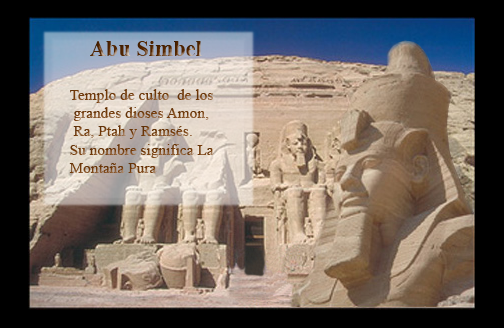
<style>
.page{position:relative;width:504px;height:328px;background:#000000}
.page>*{position:absolute;margin:0}
.t1{font:22.2px "TimesNewRomanPS-BoldMT";color:#552600}
.t2{font:15.3px "TimesNewRomanPSMT";color:#763c0a}
</style>
<div class="page">
<p class="t1" style="left:90px;top:41px;width:112px;height:15px">Abu Simbel</p>
<p class="t2" style="left:69px;top:89px;width:145px;height:84px">Templo de culto  de los<br> grandes dioses Amon,<br> Ra, Ptah y Ramsés. <br>Su nombre significa La <br>Montaña Pura</p>
</div>
